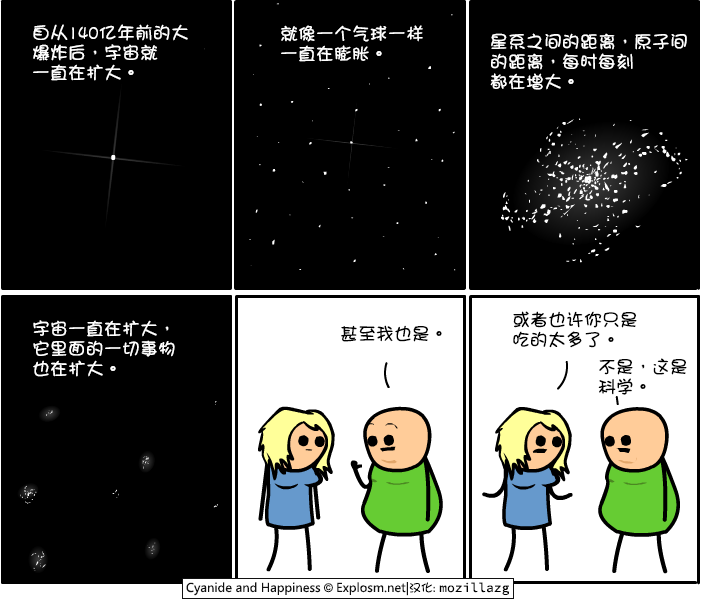
<style>
.page{position:relative;width:701px;height:599px;background:#000000}
.page>*{position:absolute;margin:0}
.t1{font:18px/20px "DFGirl";color:#ffffff}
.t2{font:18px/20px "DFGirl";color:#000000}
.t3{font:18px "DFGirl";color:#000000}
</style>
<div class="page">
<p class="t1" style="left:33px;top:24px;width:155px;height:57px">自从140亿年前的大<br>爆炸后，宇宙就<br>一直在扩大。</p>
<p class="t1" style="left:281px;top:25px;width:142px;height:37px">就像一个气球一样<br>一直在膨胀。</p>
<p class="t1" style="left:490px;top:33px;width:197px;height:57px">星系之间的距离，原子间<br>的距离，每时每刻<br>都在增大。</p>
<p class="t2" style="left:513px;top:311px;width:124px;height:37px">或者也许你只是<br>吃的太多了。</p>
<p class="t1" style="left:33px;top:320px;width:142px;height:57px">宇宙一直在扩大，<br>它里面的一切事物<br>也在扩大。</p>
<p class="t3" style="left:341px;top:325px;width:101px;height:17px">甚至我也是。</p>
<p class="t2" style="left:598px;top:358px;width:89px;height:37px">不是，这是<br>科学。</p>
</div>
